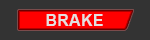
<style>
.page{position:relative;width:150px;height:40px;background:#333333}
.page>*{position:absolute;margin:0}
.t1{font:16.3px "Arial-BoldMT";color:#e2e2e2}
</style>
<div class="page">
<p class="t1" style="left:46px;top:14px;width:57px;height:12px">BRAKE</p>
</div>
